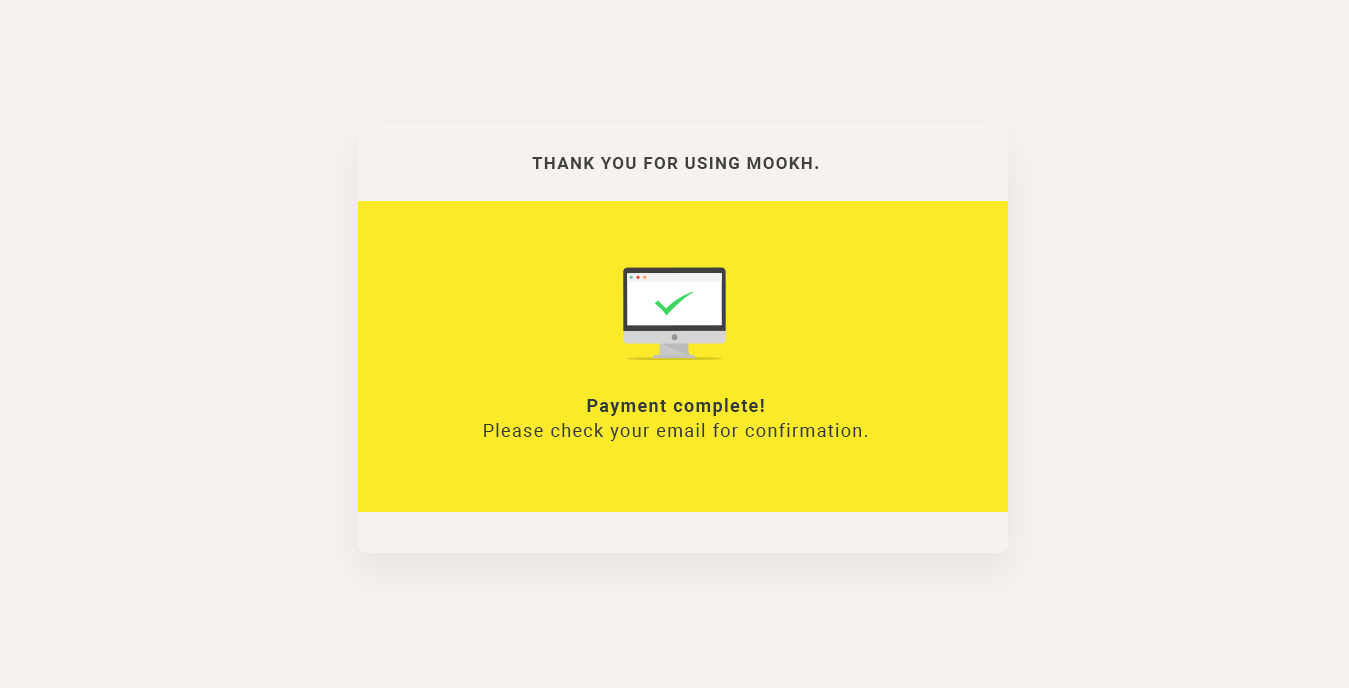
<style>
.page{position:relative;width:1349px;height:688px;background:#f6f2ed}
.page>*{position:absolute;margin:0}
.t1{font:17px "Roboto-Bold";letter-spacing:0.075em;color:#404040}
.t2{font:18px/25px "Roboto-Regular";letter-spacing:0.075em;color:#31383e}
.t3{font:18px/25px "Roboto-Bold";letter-spacing:0.075em;color:#31383e}
</style>
<div class="page">
<p class="t1" style="left:532px;top:157px;width:286px;height:12px">THANK YOU FOR USING MOOKH.</p>
<p class="t2" style="left:484px;top:398px;width:383px;height:43px;text-align:center"><span class="t3">Payment complete!<br></span>Please check your email for confirmation.</p>
</div>
